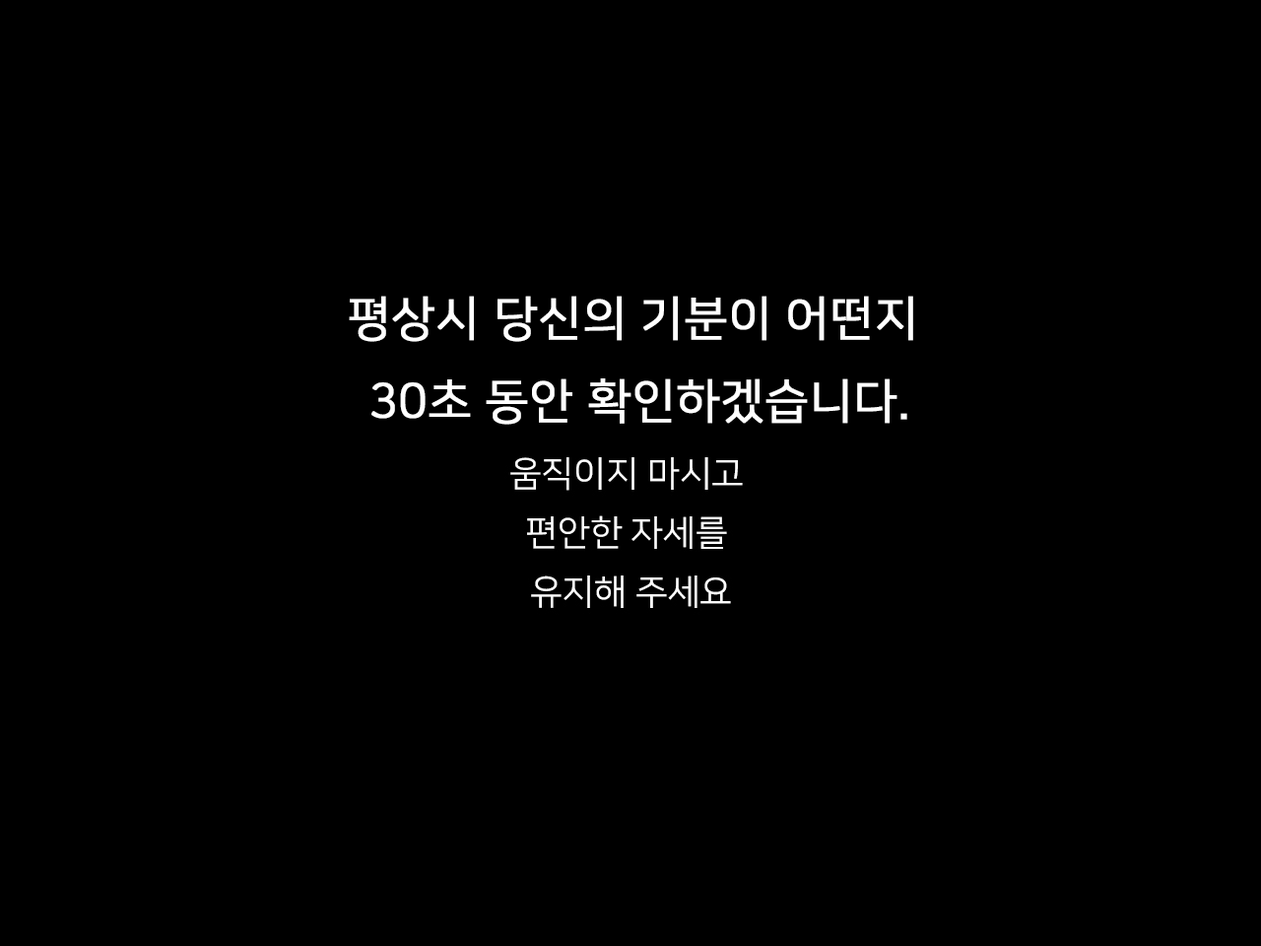
<style>
.page{position:relative;width:1261px;height:946px;background:#000000}
.page>*{position:absolute;margin:0}
.t1{font:47.3px "NanumSquareR";color:#ffffff;font-weight:bold}
</style>
<div class="page">
<p class="t1" style="left:349px;top:296px;width:564px;height:129px;text-align:center">평상시 당신의 기분이 어떤지 <br>30초 동안 확인하겠습니다.</p>
</div>
